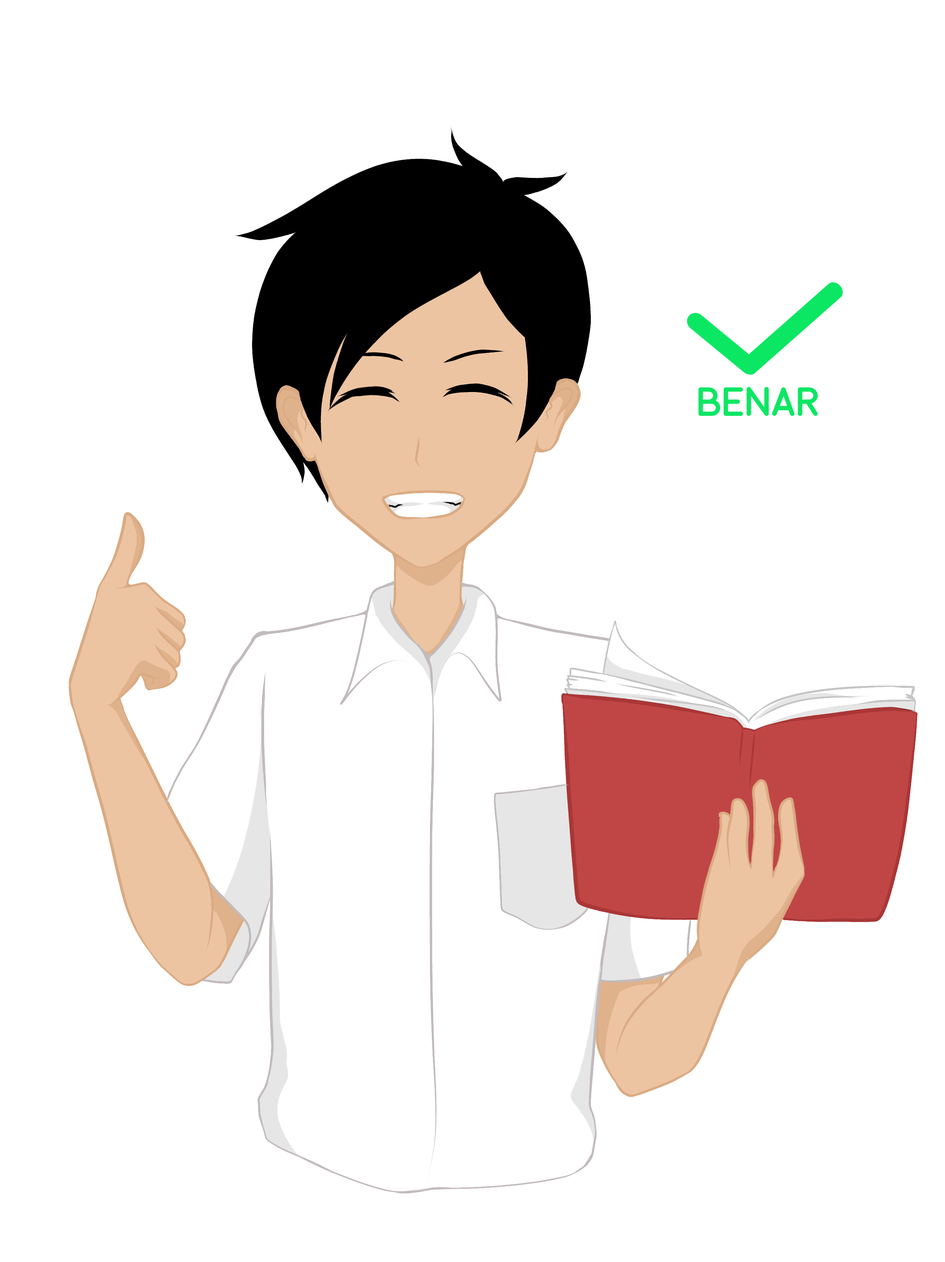
<style>
.page{position:relative;width:945px;height:1262px;background:#ffffff}
.page>*{position:absolute;margin:0}
.t1{font:40.6px "Arciform";color:#0ce763;font-weight:bold;scale:1.05 1}
</style>
<div class="page">
<p class="t1" style="left:698px;top:387px;width:120px;height:29px">BENAR</p>
</div>
